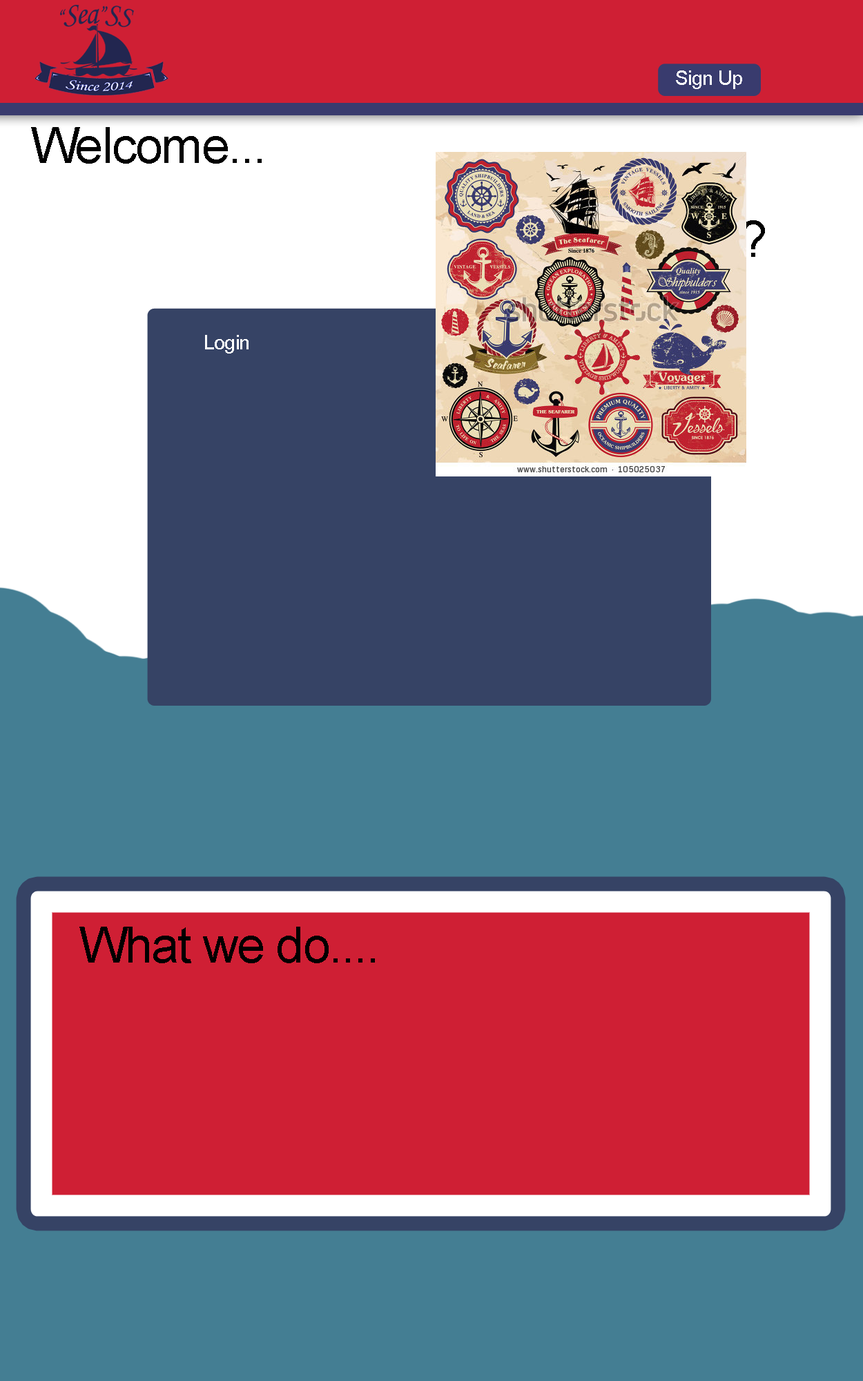
<style>
.page{position:relative;width:863px;height:1381px;background:#447e93}
.page>*{position:absolute;margin:0}
.t1{font:19.9px "ArialMT";letter-spacing:-0.025em;color:#ffffff}
.t2{font:49.7px "ArialMT";letter-spacing:-0.025em;color:#000000}
</style>
<div class="page">
<p class="t1" style="left:676px;top:70px;width:66px;height:19px">Sign Up</p>
<p class="t2" style="left:31px;top:127px;width:231px;height:37px">Welcome...</p>
<p class="t1" style="left:205px;top:335px;width:44px;height:19px">Login</p>
<p class="t2" style="left:79px;top:927px;width:296px;height:36px">What we do....</p>
</div>
